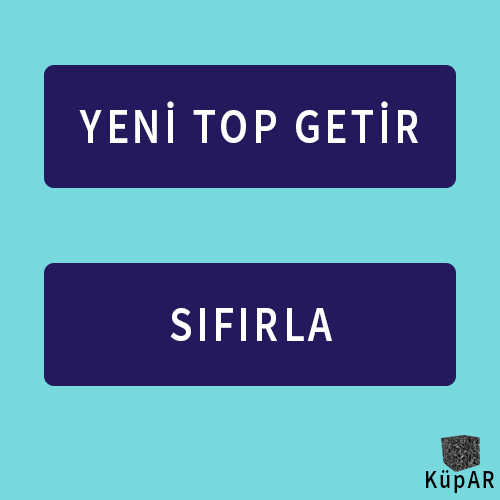
<style>
.page{position:relative;width:500px;height:500px;background:#77d8de}
.page>*{position:absolute;margin:0}
.t1{font:49.5px "SourceSansPro-Semibold";letter-spacing:0.089em;color:#ffffff;scale:0.87 1}
.t2{font:25.3px "SourceSansPro-Semibold";letter-spacing:0.089em;color:#000000;scale:0.87 1}
</style>
<div class="page">
<p class="t1" style="left:79px;top:101px;width:339px;height:42px">YENİ TOP GETİR</p>
<p class="t1" style="left:170px;top:308px;width:162px;height:33px">SIFIRLA</p>
<p class="t2" style="left:426px;top:470px;width:68px;height:23px">KüpAR</p>
</div>
